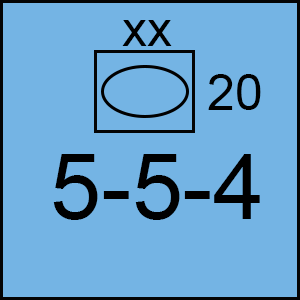
<style>
.page{position:relative;width:300px;height:300px;background:#74b4e4}
.page>*{position:absolute;margin:0}
.t1{font:50px "ArialMT";color:#000000}
.t2{font:91.7px "ArialMT";color:#000000}
</style>
<div class="page">
<p class="t1" style="left:122px;top:20px;width:50px;height:26px">xx</p>
<p class="t1" style="left:208px;top:74px;width:53px;height:36px">20</p>
<p class="t2" style="left:53px;top:154px;width:207px;height:66px">5-5-4</p>
</div>
